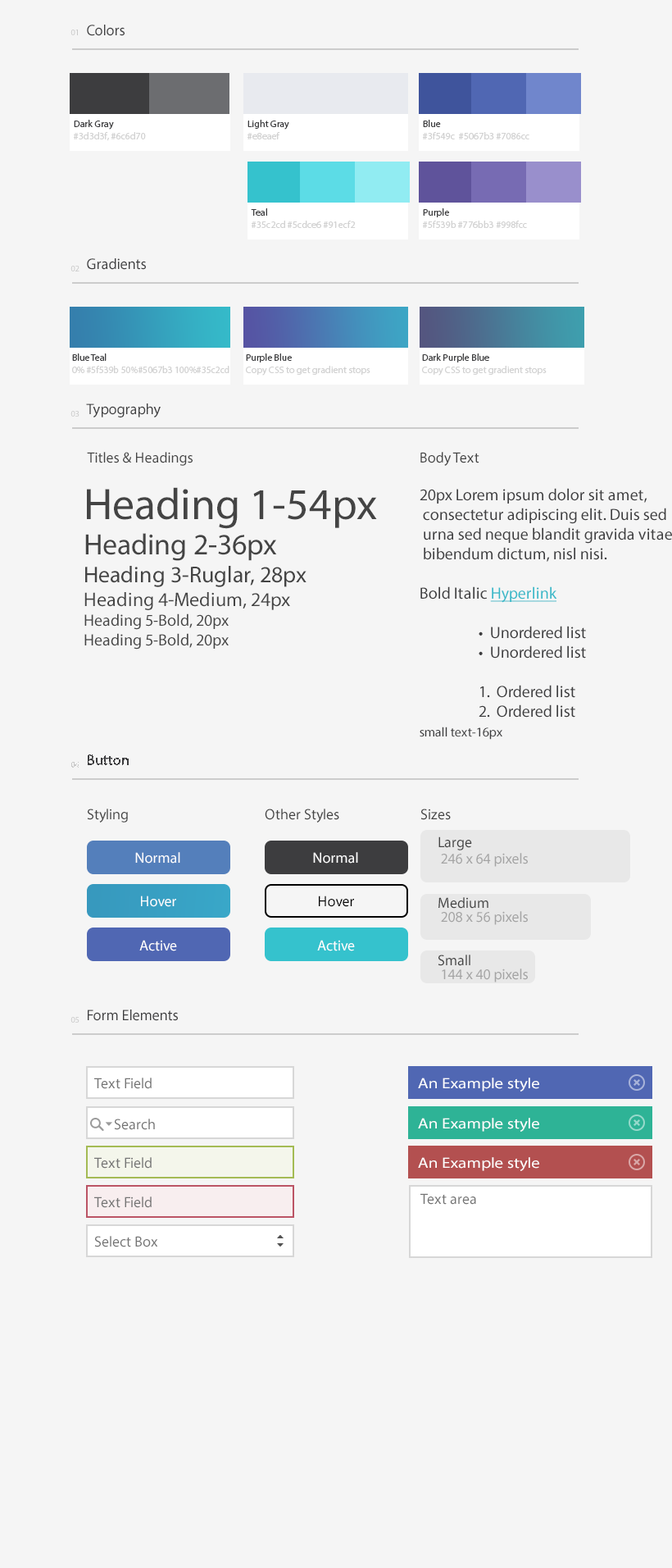
<style>
.page{position:relative;width:672px;height:1568px;background:#f5f5f5}
.page>*{position:absolute;margin:0}
.t1{font:8.6px "MyriadPro-Regular";color:#c9c9c9}
.t2{font:15.1px "MyriadPro-Regular";color:#3d3d3f}
.t3{font:9.7px "MyriadPro-Regular";color:#d2d2d2}
.t4{font:9.7px "MyriadPro-Regular";color:#3d3d3f}
.t5{font:14.8px "MyriadPro-Regular";color:#444444}
.t6{font:16.4px/19.7px "MyriadPro-Regular";color:#3d3d3f}
.t7{font:16.4px/19.7px "MyriadPro-Regular";color:#35b8c8;text-decoration:underline}
.t8{font:13.1px/19.7px "MyriadPro-Regular";color:#3d3d3f}
.t9{font:16.4px "MyriadPro-Regular";color:#444444}
.t10{font:44.3px "MyriadPro-Regular";color:#444444}
.t11{font:29.5px "MyriadPro-Regular";color:#444444}
.t12{font:23px "MyriadPro-Regular";color:#444444}
.t13{font:19.7px "MyriadPro-Regular";color:#444444}
.t14{font:14.8px "MyriadPro-Regular";color:#fefefe}
.t15{font:14.8px "MyriadPro-Regular";color:#a4a4a4}
.t16{font:14.8px "MyriadPro-Regular";color:#000000}
.t17{font:14.8px "MyriadPro-Regular";color:#747474}
.t18{font:14.8px "MyriadPro-Regular";color:#ffffff;scale:1.17 1}
.t19{font:14.8px "FontAwesome";color:#747474}
</style>
<div class="page">
<p class="t1" style="left:71px;top:30px;width:7px;height:5px">01</p>
<p class="t2" style="left:87px;top:25px;width:38px;height:11px">Colors</p>
<p class="t3" style="left:74px;top:120px;width:72px;height:21px"><span class="t4">Dark Gray<br></span>#3d3d3f, #6c6d70</p>
<p class="t4" style="left:248px;top:120px;width:41px;height:19px">Light Gray<br><span class="t3">#e8eaef</span></p>
<p class="t3" style="left:423px;top:120px;width:107px;height:19px"><span class="t4">Blue<br></span>#3f549c  #5067b3 #7086cc</p>
<p class="t3" style="left:251px;top:208px;width:105px;height:20px"><span class="t4">Teal<br></span>#35c2cd #5cdce6 #91ecf2</p>
<p class="t3" style="left:423px;top:208px;width:104px;height:20px"><span class="t4">Purple<br></span>#5f539b #776bb3 #998fcc</p>
<p class="t1" style="left:71px;top:266px;width:9px;height:5px">02</p>
<p class="t2" style="left:87px;top:258px;width:59px;height:12px">Gradients</p>
<p class="t3" style="left:72px;top:353px;width:158px;height:20px"><span class="t4">Blue Teal<br></span>0% #5f539b 50%#5067b3 100%#35c2cd</p>
<p class="t3" style="left:246px;top:353px;width:125px;height:23px"><span class="t4">Purple Blue<br></span>Copy CSS to get gradient stops</p>
<p class="t3" style="left:422px;top:353px;width:125px;height:23px"><span class="t4">Dark Purple Blue<br></span>Copy CSS to get gradient stops</p>
<p class="t1" style="left:71px;top:411px;width:9px;height:6px">03</p>
<p class="t2" style="left:86px;top:403px;width:75px;height:14px">Typography</p>
<p class="t5" style="left:87px;top:452px;width:106px;height:14px">Titles &amp; Headings</p>
<p class="t6" style="left:420px;top:452px;width:252px;height:288px"><span class="t5">Body Text<br><br></span>20px Lorem ipsum dolor sit amet,<br> consectetur adipiscing elit. Duis sed<br> urna sed neque blandit gravida vitae<br> bibendum dictum, nisl nisi.<br><br>Bold Italic <span class="t7">Hyperlink<br><br> </span> •  Unordered list<br>  •  Unordered list<br>  <br>  1.  Ordered list<br>  2.  Ordered list<br><span class="t8">small text-16px</span></p>
<p class="t9" style="left:84px;top:487px;width:293px;height:163px"><span class="t10">Heading 1-54px<br></span><span class="t11">Heading 2-36px<br></span><span class="t12">Heading 3-Ruglar, 28px<br></span><span class="t13">Heading 4-Medium, 24px<br></span>Heading 5-Bold, 20px<br>Heading 5-Bold, 20px</p>
<p class="t1" style="left:71px;top:762px;width:9px;height:6px">04</p>
<p class="t2" style="left:88px;top:754px;width:41px;height:11px">Button</p>
<p class="t5" style="left:87px;top:809px;width:41px;height:14px">Styling</p>
<p class="t5" style="left:265px;top:809px;width:75px;height:14px">Other Styles</p>
<p class="t5" style="left:421px;top:809px;width:30px;height:11px">Sizes</p>
<p class="t5" style="left:439px;top:836px;width:33px;height:14px">Large</p>
<p class="t14" style="left:135px;top:852px;width:45px;height:12px">Normal</p>
<p class="t14" style="left:313px;top:852px;width:45px;height:12px">Normal</p>
<p class="t15" style="left:441px;top:853px;width:87px;height:14px">246 x 64 pixels</p>
<p class="t14" style="left:141px;top:896px;width:35px;height:11px">Hover</p>
<p class="t16" style="left:319px;top:896px;width:35px;height:11px">Hover</p>
<p class="t5" style="left:439px;top:897px;width:50px;height:12px">Medium</p>
<p class="t15" style="left:441px;top:911px;width:87px;height:14px">208 x 56 pixels</p>
<p class="t14" style="left:139px;top:940px;width:38px;height:11px">Active</p>
<p class="t14" style="left:317px;top:940px;width:38px;height:11px">Active</p>
<p class="t5" style="left:438px;top:955px;width:33px;height:11px">Small</p>
<p class="t15" style="left:442px;top:969px;width:86px;height:13px">144 x 40 pixels</p>
<p class="t2" style="left:88px;top:1010px;width:90px;height:11px">Form Elements</p>
<p class="t1" style="left:71px;top:1017px;width:9px;height:6px">05</p>
<p class="t17" style="left:94px;top:1078px;width:58px;height:11px">Text Field</p>
<p class="t18" style="left:418px;top:1078px;width:122px;height:14px">An Example style</p>
<p class="t17" style="left:114px;top:1119px;width:41px;height:11px"><span class="t19">   </span> Search</p>
<p class="t18" style="left:418px;top:1118px;width:122px;height:14px">An Example style</p>
<p class="t17" style="left:94px;top:1157px;width:58px;height:12px">Text Field</p>
<p class="t18" style="left:418px;top:1157px;width:122px;height:14px">An Example style</p>
<p class="t17" style="left:421px;top:1193px;width:55px;height:12px">Text area</p>
<p class="t17" style="left:94px;top:1197px;width:58px;height:11px">Text Field</p>
<p class="t17" style="left:94px;top:1236px;width:64px;height:11px">Select Box</p>
</div>
